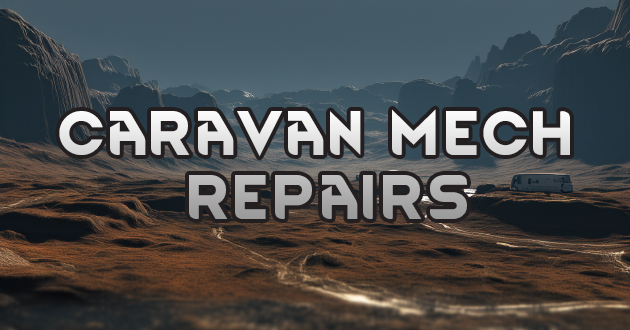
<style>
.page{position:relative;width:630px;height:330px}
.page>*{position:absolute;margin:0}
.t1{font:53.3px "RimWordFont"}
</style>
<div class="page">
<p class="t1" style="left:59px;top:109px;width:511px;height:110px;text-align:center">Caravan mech <br>repairs</p>
</div>
